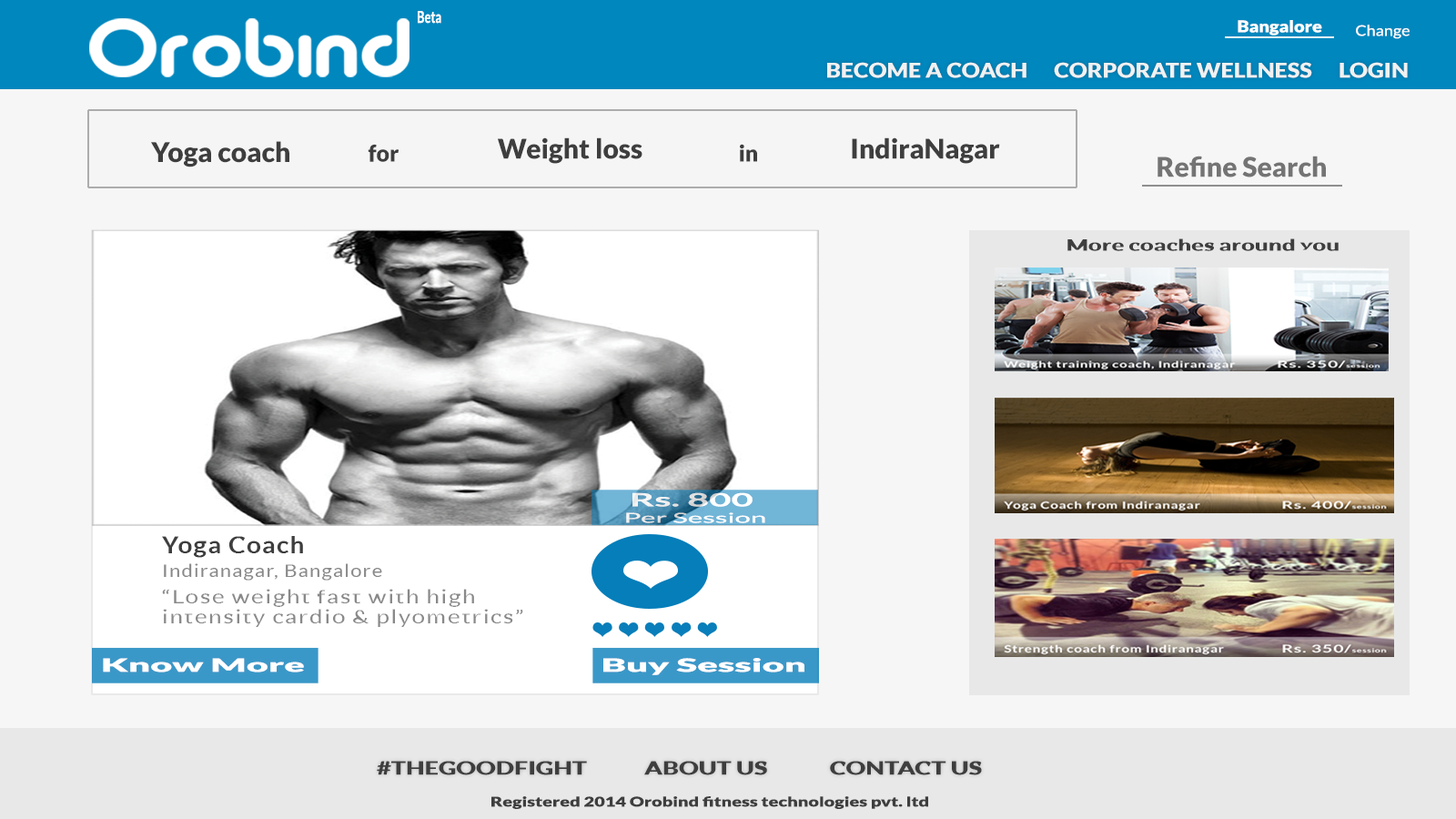
<style>
.page{position:relative;width:1456px;height:819px;background:#f6f6f6}
.page>*{position:absolute;margin:0}
.t1{font:16.4px "Lato-Bold";letter-spacing:0.002em;color:#ffffff;scale:0.71 1}
.t2{font:16.2px "Lato-Black";color:#fcfcfc;scale:1.12 1}
.t3{font:14.6px "Lato-Regular";color:#fcfcfc;scale:1.12 1}
.t4{font:20.3px "Lato-Black";color:#f1f1f1;text-transform:uppercase;scale:1.12 1}
.t5{font:27.3px "Lato-Black";color:#3e3e3e}
.t6{font:31.8px "Lato-Black";color:#3e3e3e}
.t7{font:22.7px "Lato-Black";color:#3e3e3e}
.t8{font:27.3px "Lato-Black";color:#747474}
.t9{font:15.6px "Lato-Black";color:#3e3e3e;scale:1.5 1}
.t10{font:13.6px "Lato-Regular";color:#ffffff;scale:2.09 1}
.t11{font:18.2px "Lato-Bold";color:#ffffff;scale:2.09 1}
.t12{font:18.2px/23.5px "Lato-Regular";letter-spacing:0.05em;color:#898989;scale:1.11 1}
.t13{font:22.7px/23.5px "Lato-Bold";letter-spacing:0.05em;color:#3e3e3e;scale:1.11 1}
.t14{font:18.2px/19.8px "Lato-Regular";letter-spacing:0.05em;color:#898989;scale:1.32 1}
.t15{font:18.2px "Lato-Black";color:#ffffff;scale:2.09 1}
.t16{font:18.2px "Lato-Black";color:#3e3e3e;text-transform:uppercase;scale:1.36 1}
.t17{font:13.4px "Lato-Black";color:#3e3e3e;scale:1.36 1}
</style>
<div class="page">
<p class="t1" style="left:418px;top:11px;width:23px;height:13px">Beta</p>
<p class="t2" style="left:1238px;top:20px;width:84px;height:15px">Bangalore</p>
<p class="t3" style="left:1356px;top:25px;width:54px;height:14px">Change</p>
<p class="t4" style="left:827px;top:62px;width:581px;height:16px">Become a coach      corporate wellness      login</p>
<p class="t5" style="left:498px;top:137px;width:144px;height:27px">Weight loss</p>
<p class="t5" style="left:852px;top:137px;width:148px;height:27px">IndiraNagar</p>
<p class="t5" style="left:151px;top:141px;width:138px;height:26px"><span class="t6"> </span>Yoga coach</p>
<p class="t7" style="left:368px;top:144px;width:31px;height:18px">for</p>
<p class="t7" style="left:740px;top:144px;width:17px;height:18px">in</p>
<p class="t8" style="left:1158px;top:156px;width:168px;height:21px">Refine Search</p>
<p class="t9" style="left:1067px;top:238px;width:272px;height:13px">More coaches around you</p>
<p class="t10" style="left:626px;top:492px;width:139px;height:31px;text-align:center"><span class="t11">Rs. 800 <br></span>Per Session</p>
<p class="t12" style="left:162px;top:536px;width:220px;height:45px"><span class="t13">Yoga Coach<br></span>Indiranagar, Bangalore</p>
<p class="t14" style="left:162px;top:589px;width:361px;height:38px">“Lose weight fast with high intensity cardio &amp; plyometrics”</p>
<p class="t15" style="left:103px;top:658px;width:201px;height:14px">Know More</p>
<p class="t15" style="left:603px;top:658px;width:201px;height:17px">Buy Session</p>
<p class="t16" style="left:377px;top:761px;width:605px;height:14px">#thegoodfight            About us             contact us</p>
<p class="t17" style="left:491px;top:796px;width:437px;height:13px">Registered 2014 Orobind fitness technologies pvt. ltd</p>
</div>
